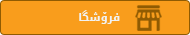
<style>
.page{position:relative;width:190px;height:35px;background:#f99d1c}
.page>*{position:absolute;margin:0}
.t1{font:11px "DroidArabicKufi-Bold";color:#f1f2f2}
</style>
<div class="page">
<p class="t1" style="left:79px;top:10px;width:41px;height:14px">فرۆشگا</p>
</div>
